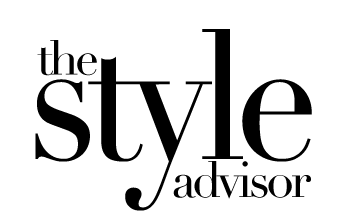
<style>
.page{position:relative;width:360px;height:216px;background:#ffffff}
.page>*{position:absolute;margin:0}
.t1{font:180px "Didot";letter-spacing:-0.075em;color:#000000;scale:0.94 1}
.t2{font:48px "Didot";letter-spacing:-0.075em;color:#000000}
.t3{font:50px "Didot";letter-spacing:-0.075em;color:#000000}
</style>
<div class="page">
<p class="t1" style="left:35px;top:29px;width:277px;height:182px">style</p>
<p class="t2" style="left:37px;top:40px;width:60px;height:36px">the</p>
<p class="t3" style="left:173px;top:161px;width:138px;height:38px">advisor</p>
</div>
